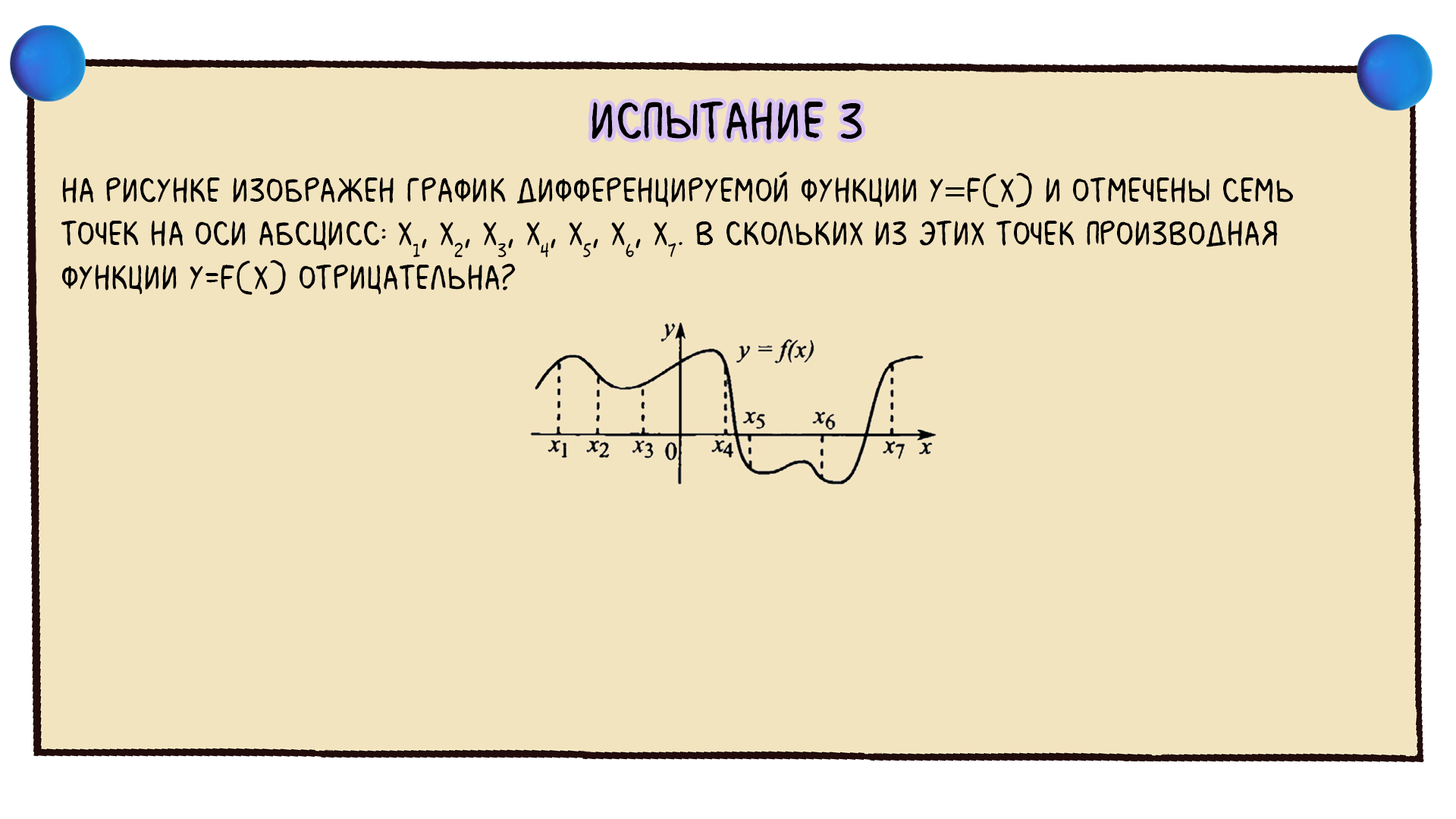
<style>
.page{position:relative;width:1456px;height:819px;background:#f3e4c0}
.page>*{position:absolute;margin:0}
.t1{font:54.6px "MilkMustacheBB";color:#000000}
.t2{font:36.4px "MilkMustacheBB";color:#000000}
.t3{font:36.4px "MyriadPro-Regular";color:#000000}
</style>
<div class="page">
<p class="t1" style="left:591px;top:101px;width:271px;height:39px">испытание 3</p>
<p class="t2" style="left:61px;top:171px;width:1232px;height:124px">На рисунке изображен график дифференцируемой функции у<span class="t3">=</span>f(x) и отмечены семь <br>точек на оси абсцисс: x1, x2, x3, x4, x5, x6, x7. В скольких из этих точек производная <br>функции у=f(x) отрицательна?</p>
</div>
